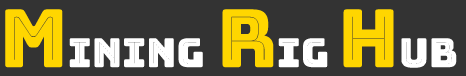
<style>
.page{position:relative;width:466px;height:76px;background:#333333}
.page>*{position:absolute;margin:0}
.t1{font:40px "BungeeInline-Regular";color:#ffffff}
.t2{font:80px "BungeeInline-Regular";color:#ffd600}
</style>
<div class="page">
<p class="t1" style="left:5px;top:9px;width:452px;height:59px"><span class="t2">M</span>ining <span class="t2">R</span>ig <span class="t2">H</span>ub</p>
</div>
